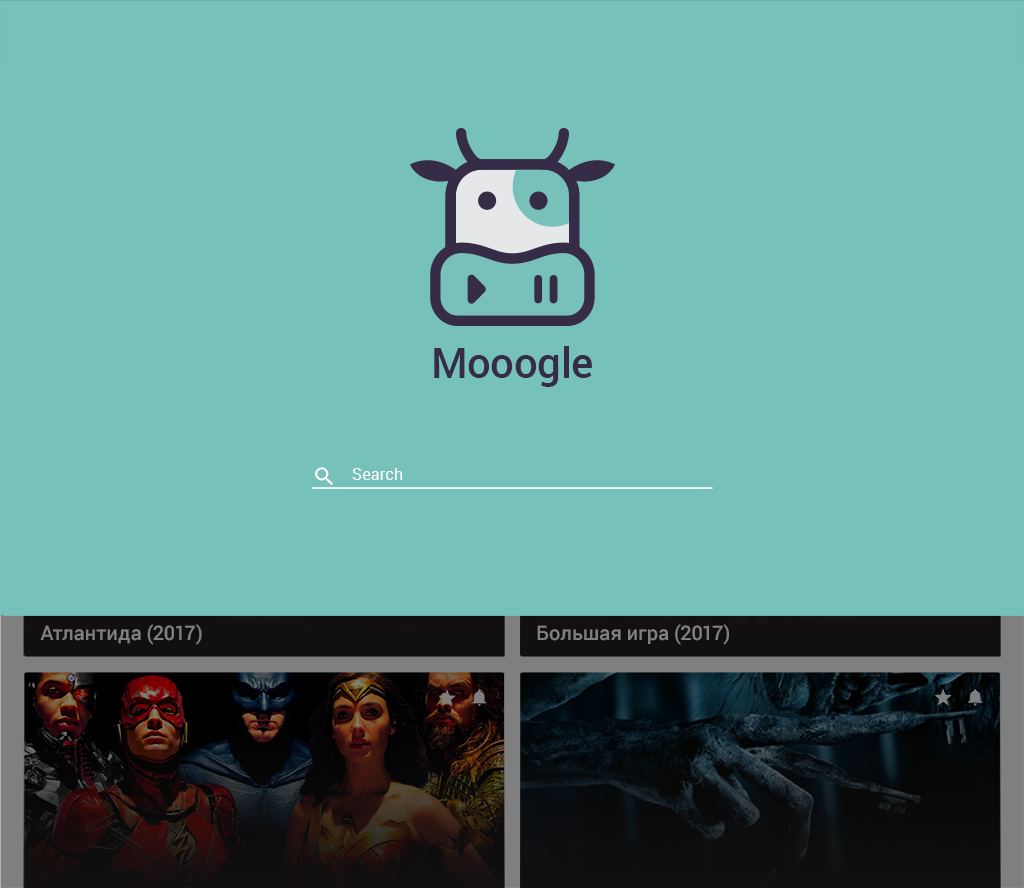
<style>
.page{position:relative;width:1024px;height:888px;background:#77c1bb}
.page>*{position:absolute;margin:0}
.t1{font:41.8px "Roboto-Medium";letter-spacing:0.005em;color:#372c48}
.t2{font:16px "Roboto-Regular";letter-spacing:0.01em;color:#ffffff}
.t3{font:20px "Roboto-Medium";color:#7f7f7f}
</style>
<div class="page">
<p class="t1" style="left:434px;top:346px;width:158px;height:41px">Mooogle</p>
<p class="t2" style="left:352px;top:468px;width:51px;height:12px">Search</p>
<p class="t3" style="left:40px;top:624px;width:162px;height:21px">Атлантида (2017)</p>
<p class="t3" style="left:537px;top:624px;width:192px;height:21px">Большая игра (2017)</p>
</div>
